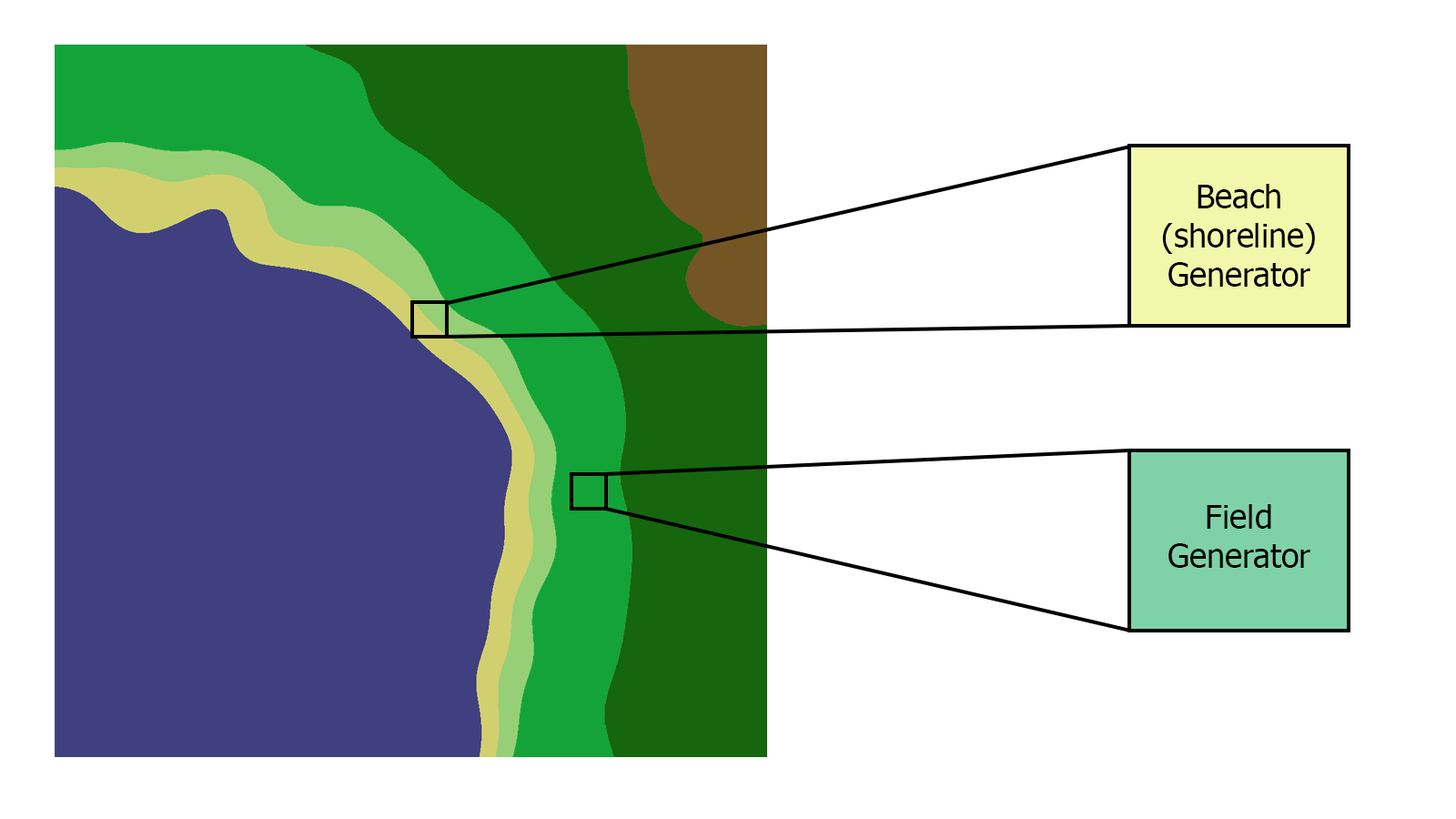
<style>
.page{position:relative;width:1456px;height:819px;background:#ffffff}
.page>*{position:absolute;margin:0}
.t1{font:32.8px "Tahoma";color:#000000}
</style>
<div class="page">
<p class="t1" style="left:1162px;top:184px;width:153px;height:103px;text-align:center">Beach<br>(shoreline)<br>Generator</p>
<p class="t1" style="left:1168px;top:504px;width:142px;height:64px;text-align:center">Field<br>Generator</p>
</div>
